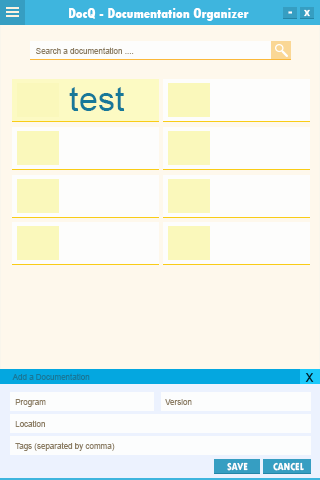
<style>
.page{position:relative;width:320px;height:480px;background:#fef8ec}
.page>*{position:absolute;margin:0}
.t1{font:14.5px "TwCenMT-CondensedExtraBold";color:#ffffff}
.t2{font:15.6px "TwCenMT-CondensedExtraBold";color:#ffffff;scale:1.04 1}
.t3{font:13.5px "TwCenMT-CondensedExtraBold";color:#ffffff;scale:1.04 1}
.t4{font:8px "ArialMT";color:#8c7d63}
.t5{font:34px "ArialMT";color:#177899}
.t6{font:8px "ArialMT";color:#177899}
.t7{font:16px "ArialMT";color:#011d27}
.t8{font:10.7px "TwCenMT-CondensedExtraBold";color:#ffffff}
</style>
<div class="page">
<p class="t1" style="left:69px;top:8px;width:180px;height:13px">DocQ - Documentation Organizer</p>
<p class="t2" style="left:288px;top:11px;width:4px;height:3px">-</p>
<p class="t3" style="left:304px;top:9px;width:6px;height:8px">x</p>
<p class="t4" style="left:36px;top:47px;width:98px;height:7px">Search a documentation ....</p>
<p class="t5" style="left:69px;top:87px;width:56px;height:24px">test</p>
<p class="t6" style="left:12px;top:373px;width:78px;height:7px">Add a Documentation</p>
<p class="t7" style="left:305px;top:373px;width:9px;height:9px">x</p>
<p class="t4" style="left:15px;top:399px;width:31px;height:8px">Program</p>
<p class="t4" style="left:165px;top:399px;width:27px;height:6px">Version</p>
<p class="t4" style="left:15px;top:420px;width:30px;height:7px">Location</p>
<p class="t4" style="left:15px;top:442px;width:100px;height:9px">Tags (separated by comma)</p>
<p class="t8" style="left:227px;top:462px;width:21px;height:9px">SAVE</p>
<p class="t8" style="left:273px;top:462px;width:31px;height:9px">CANCEL</p>
</div>
